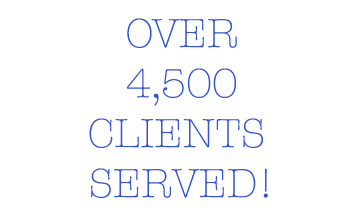
<style>
.page{position:relative;width:360px;height:220px;background:#ffffff}
.page>*{position:absolute;margin:0}
.t1{font:41.7px "AmericanTypewriter-Light";color:#3454d1}
</style>
<div class="page">
<p class="t1" style="left:89px;top:18px;width:179px;height:180px;text-align:center">OVER<br>4,500<br>CLIENTS <br>SERVED!</p>
</div>
